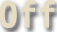
<style>
.page{position:relative;width:57px;height:32px;background:#e6dcc1}
.page>*{position:absolute;margin:0}
.t1{font:36px "Menlo-Bold";color:#e6dcc1;scale:0.9 1}
</style>
<div class="page">
<p class="t1" style="left:0px;top:0px;width:55px;height:28px">Off</p>
</div>
